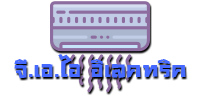
<style>
.page{position:relative;width:200px;height:100px;background:#ffffff}
.page>*{position:absolute;margin:0}
.t1{font:27.8px "-LayijiTaMaiTine1";color:#4669ff}
</style>
<div class="page">
<p class="t1" style="left:14px;top:54px;width:172px;height:24px">จี.เอ.ไอ อิเลคทริค</p>
</div>
